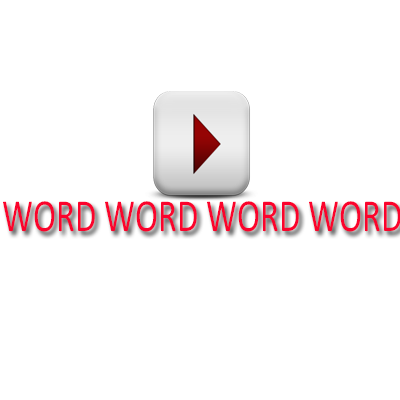
<style>
.page{position:relative;width:400px;height:400px;background:#ffffff}
.page>*{position:absolute;margin:0}
.t1{font:46.3px "Calibri";color:#fb032c;scale:0.75 1}
</style>
<div class="page">
<p class="t1" style="left:3px;top:201px;width:398px;height:31px">WORD WORD WORD WORD</p>
</div>
